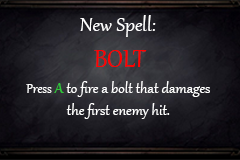
<style>
.page{position:relative;width:240px;height:160px}
.page>*{position:absolute;margin:0}
.t1{font:24px "Gabriola";color:#ffffff}
.t2{font:30px "Gabriola";color:#ff0000}
.t3{font:18px "Gabriola";color:#ffffff}
.t4{font:16px "Gabriola";color:#ffffff}
.t5{font:18px "Gabriola";color:#2fc939}
</style>
<div class="page">
<p class="t1" style="left:80px;top:15px;width:76px;height:22px">New Spell:</p>
<p class="t2" style="left:94px;top:50px;width:53px;height:17px">BOLT</p>
<p class="t3" style="left:26px;top:81px;width:184px;height:38px;text-align:center"><span class="t4">Press </span><span class="t5">A </span>to fire a bolt that damages<br>the first enemy hit.</p>
</div>
